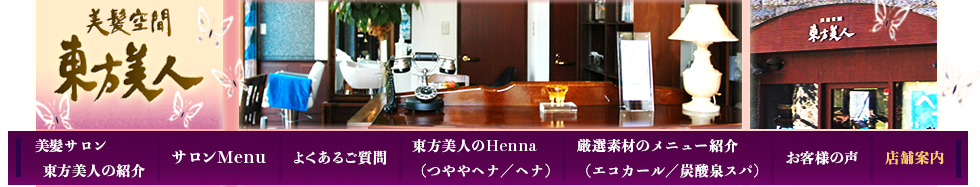
<style>
.page{position:relative;width:980px;height:187px}
.page>*{position:absolute;margin:0}
.t1{font:13.9px "ToppanBunkyuMidashiMinchoStdN-ExtraBold";letter-spacing:0.05em;color:#ffffff}
.t2{font:15.9px "ToppanBunkyuMidashiMinchoStdN-ExtraBold";letter-spacing:0.05em;color:#ffffff}
.t3{font:14px "ToppanBunkyuMidashiMinchoStdN-ExtraBold";letter-spacing:0.05em;color:#ffffff}
.t4{font:13.9px "ToppanBunkyuMidashiMinchoStdN-ExtraBold";letter-spacing:0.05em;color:#ffcc66}
</style>
<div class="page">
<p class="t1" style="left:35px;top:139px;width:110px;height:39px">美髪サロン<br>  東方美人の紹介</p>
<p class="t2" style="left:172px;top:150px;width:94px;height:14px">サロンMenu</p>
<p class="t3" style="left:294px;top:150px;width:93px;height:15px">よくあるご質問</p>
<p class="t1" style="left:412px;top:139px;width:138px;height:39px">東方美人のHenna<br>（つややヘナ／ヘナ）</p>
<p class="t1" style="left:577px;top:138px;width:182px;height:40px">厳選素材のメニュー紹介<br>（エコカール／炭酸泉スパ）</p>
<p class="t4" style="left:885px;top:150px;width:59px;height:15px">店舗案内</p>
<p class="t1" style="left:786px;top:151px;width:72px;height:14px">お客様の声</p>
</div>
